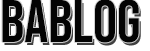
<style>
.page{position:relative;width:150px;height:51px;background:#040404}
.page>*{position:absolute;margin:0}
.t1{font:60px "BebasNeue-Regular";color:#040404}
</style>
<div class="page">
<p class="t1" style="left:2px;top:0px;width:137px;height:43px">BaBlog</p>
</div>
